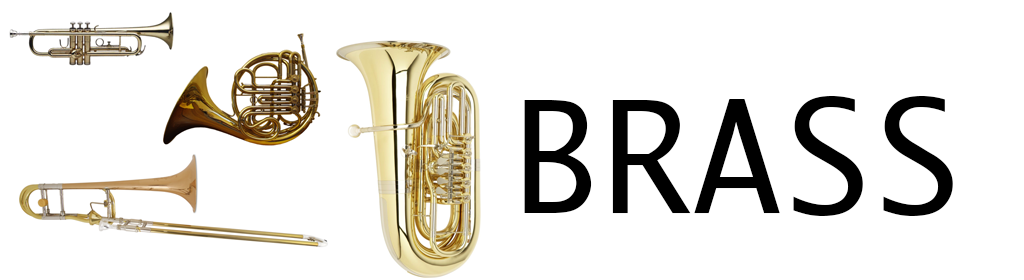
<style>
.page{position:relative;width:1024px;height:280px;background:#ffffff}
.page>*{position:absolute;margin:0}
.t1{font:150px "Ayuthaya";color:#000000}
</style>
<div class="page">
<p class="t1" style="left:524px;top:96px;width:429px;height:120px">BRASS</p>
</div>
